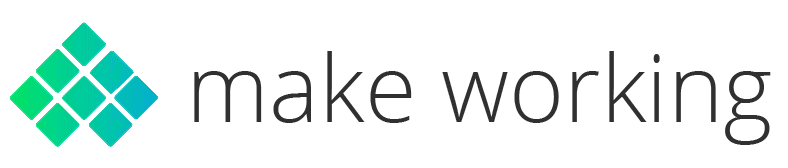
<style>
.page{position:relative;width:788px;height:168px;background:#ffffff}
.page>*{position:absolute;margin:0}
.t1{font:94.3px "OpenSans-Light";color:#303030}
</style>
<div class="page">
<p class="t1" style="left:194px;top:51px;width:577px;height:94px">make working</p>
</div>
